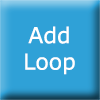
<style>
.page{position:relative;width:100px;height:100px;background:#2fa1d7}
.page>*{position:absolute;margin:0}
.t1{font:22px "Verdana";color:#ffffff}
</style>
<div class="page">
<p class="t1" style="left:25px;top:26px;width:50px;height:49px;text-align:center">Add<br>Loop</p>
</div>
